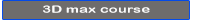
<style>
.page{position:relative;width:224px;height:20px;background:#6e6c6c}
.page>*{position:absolute;margin:0}
.t1{font:10.2px "ArialRoundedMTBold";color:#fcfcfc;scale:1.47 1}
</style>
<div class="page">
<p class="t1" style="left:43px;top:5px;width:107px;height:8px">3D max course</p>
</div>
